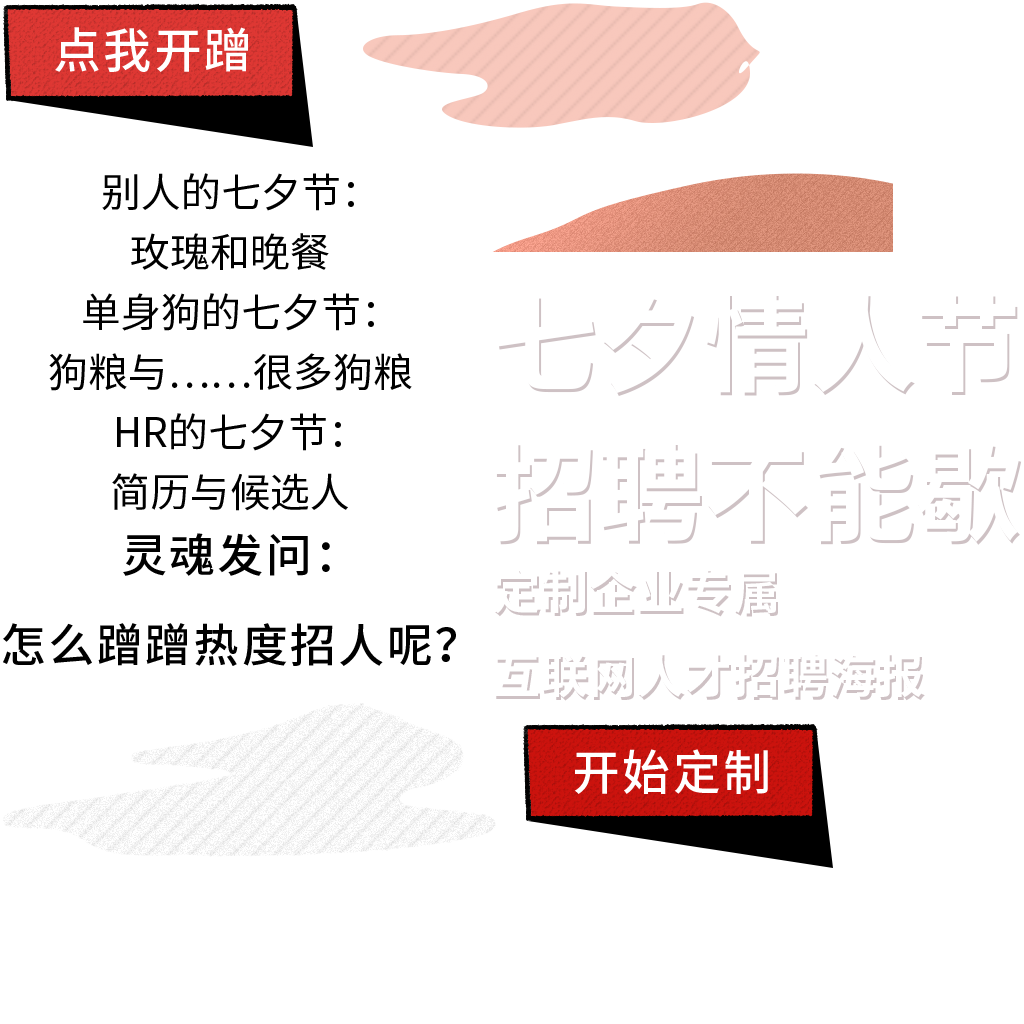
<style>
.page{position:relative;width:1024px;height:1024px;background:#ffffff}
.page>*{position:absolute;margin:0}
.t1{font:48px "SourceHanSansCN-Medium";letter-spacing:0.05em;color:#ffffff;text-transform:uppercase}
.t2{font:40px "SourceHanSansCN-Regular";color:#000000;text-transform:uppercase}
.t3{font:46px/90px "SourceHanSansCN-Medium";letter-spacing:0.05em;color:#000000;text-transform:uppercase}
</style>
<div class="page">
<p class="t1" style="left:55px;top:27px;width:193px;height:45px">点我开蹭</p>
<p class="t2" style="left:102px;top:173px;width:252px;height:38px">别人的七夕节：</p>
<p class="t2" style="left:131px;top:233px;width:198px;height:37px">玫瑰和晚餐</p>
<p class="t2" style="left:83px;top:293px;width:291px;height:38px">单身狗的七夕节：</p>
<p class="t2" style="left:49px;top:353px;width:363px;height:38px">狗粮与……很多狗粮</p>
<p class="t2" style="left:117px;top:413px;width:224px;height:38px">HR的七夕节：</p>
<p class="t2" style="left:112px;top:473px;width:236px;height:38px">简历与候选人</p>
<p class="t3" style="left:3px;top:533px;width:453px;height:133px;text-align:center">灵魂发问：<br>怎么蹭蹭热度招人呢？</p>
<p class="t1" style="left:574px;top:749px;width:194px;height:45px">开始定制</p>
</div>
